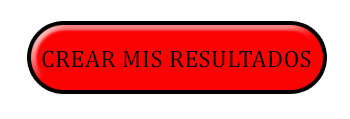
<style>
.page{position:relative;width:350px;height:119px;background:#ffffff}
.page>*{position:absolute;margin:0}
.t1{font:24px "Cambria";letter-spacing:0.025em;color:#000000}
</style>
<div class="page">
<p class="t1" style="left:42px;top:50px;width:269px;height:18px">CREAR MIS RESULTADOS</p>
</div>
